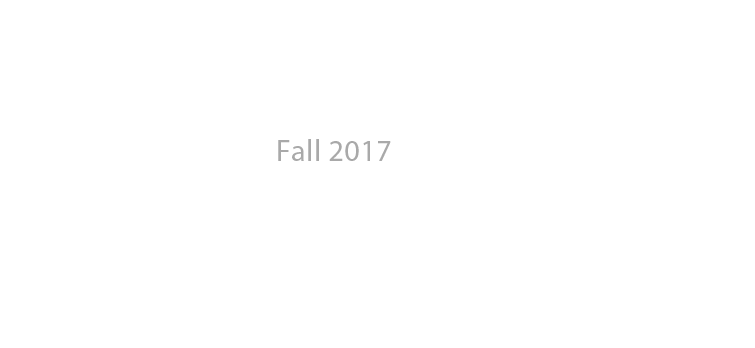
<style>
.page{position:relative;width:755px;height:348px;background:#ffffff}
.page>*{position:absolute;margin:0}
.t1{font:30px "MyriadPro-Regular";letter-spacing:0.02em;color:#a9a9a9}
</style>
<div class="page">
<p class="t1" style="left:278px;top:139px;width:113px;height:22px">Fall 2017</p>
</div>
